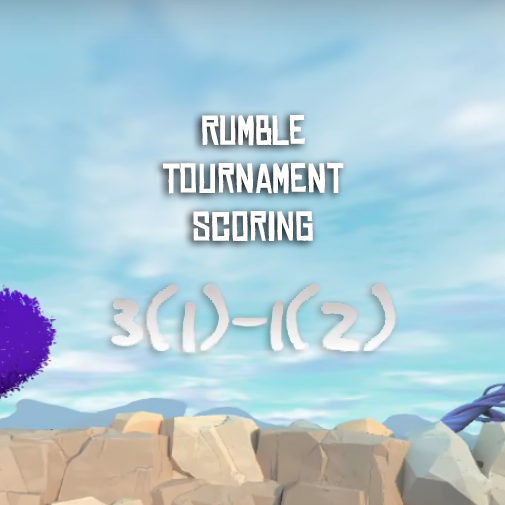
<style>
.page{position:relative;width:505px;height:505px}
.page>*{position:absolute;margin:0}
.t1{font:40px "ChineseRocksRg-Regular";color:#ffffff}
</style>
<div class="page">
<p class="t1" style="left:163px;top:115px;width:181px;height:127px;text-align:center">Rumble<br>Tournament<br>Scoring</p>
</div>
